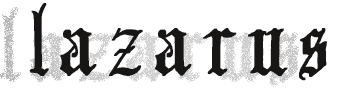
<style>
.page{position:relative;width:350px;height:100px;background:#ffffff}
.page>*{position:absolute;margin:0}
.t1{font:72px "English-Gothic,-17th-c.-Regular";letter-spacing:0.1em;color:#181515;font-weight:bold}
</style>
<div class="page">
<p class="t1" style="left:29px;top:3px;width:298px;height:78px">lazarus</p>
</div>
